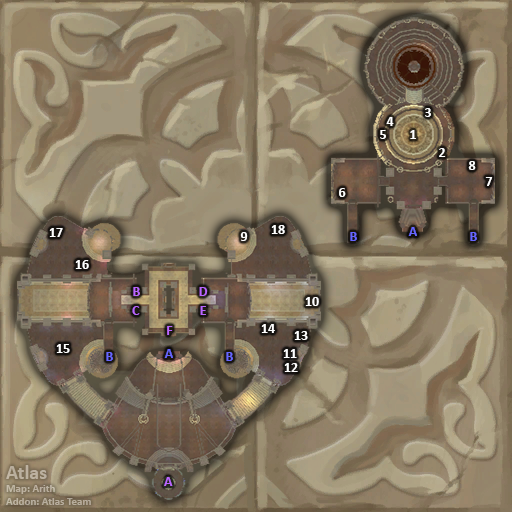
<style>
.page{position:relative;width:512px;height:512px}
.page>*{position:absolute;margin:0}
.t1{font:14px "Calibri-Bold";color:#ffffff}
.t2{font:14px "Calibri-Bold";color:#6666ff}
.t3{font:14px "Calibri-Bold";color:#bb66ff}
.t4{font:11px "Calibri-Bold";color:#bbb0a0}
.t5{font:20px "Calibri-Bold";color:#bbb0a0}
</style>
<div class="page">
<p class="t1" style="left:425px;top:108px;width:6px;height:9px">3</p>
<p class="t1" style="left:386px;top:117px;width:8px;height:9px">4</p>
<p class="t1" style="left:380px;top:130px;width:6px;height:9px">5</p>
<p class="t1" style="left:410px;top:130px;width:6px;height:9px">1</p>
<p class="t1" style="left:439px;top:148px;width:7px;height:9px">2</p>
<p class="t1" style="left:468px;top:161px;width:8px;height:9px">8</p>
<p class="t1" style="left:485px;top:177px;width:8px;height:9px">7</p>
<p class="t1" style="left:339px;top:188px;width:7px;height:9px">6</p>
<p class="t1" style="left:49px;top:228px;width:14px;height:9px">17</p>
<p class="t1" style="left:240px;top:232px;width:8px;height:9px">9</p>
<p class="t1" style="left:271px;top:225px;width:14px;height:9px">18</p>
<p class="t2" style="left:350px;top:232px;width:7px;height:9px">B</p>
<p class="t2" style="left:408px;top:227px;width:9px;height:9px">A</p>
<p class="t2" style="left:470px;top:232px;width:7px;height:9px">B</p>
<p class="t1" style="left:75px;top:260px;width:14px;height:9px">16</p>
<p class="t3" style="left:133px;top:287px;width:7px;height:9px">B</p>
<p class="t3" style="left:199px;top:287px;width:9px;height:9px">D</p>
<p class="t1" style="left:305px;top:297px;width:14px;height:9px">10</p>
<p class="t3" style="left:132px;top:306px;width:8px;height:9px">C</p>
<p class="t3" style="left:200px;top:306px;width:6px;height:9px">E</p>
<p class="t3" style="left:167px;top:326px;width:6px;height:9px">F</p>
<p class="t1" style="left:261px;top:324px;width:14px;height:9px">14</p>
<p class="t1" style="left:294px;top:331px;width:14px;height:9px">13</p>
<p class="t1" style="left:56px;top:344px;width:14px;height:9px">15</p>
<p class="t2" style="left:106px;top:352px;width:7px;height:9px">B</p>
<p class="t2" style="left:164px;top:349px;width:9px;height:9px">A</p>
<p class="t2" style="left:226px;top:352px;width:7px;height:9px">B</p>
<p class="t1" style="left:283px;top:349px;width:14px;height:9px">11</p>
<p class="t1" style="left:284px;top:363px;width:14px;height:9px">12</p>
<p class="t4" style="left:6px;top:465px;width:85px;height:40px"><span class="t5">Atlas<br></span>Map: Arith<br>Addon: Atlas Team</p>
<p class="t3" style="left:164px;top:477px;width:9px;height:9px">A</p>
</div>
